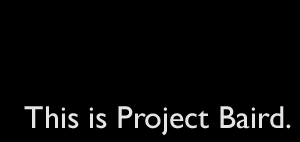
<style>
.page{position:relative;width:300px;height:142px;background:#000000}
.page>*{position:absolute;margin:0}
.t1{font:32px "GillSans";color:#e5e5e5}
</style>
<div class="page">
<p class="t1" style="left:24px;top:106px;width:267px;height:30px">This is Project Baird.</p>
</div>
